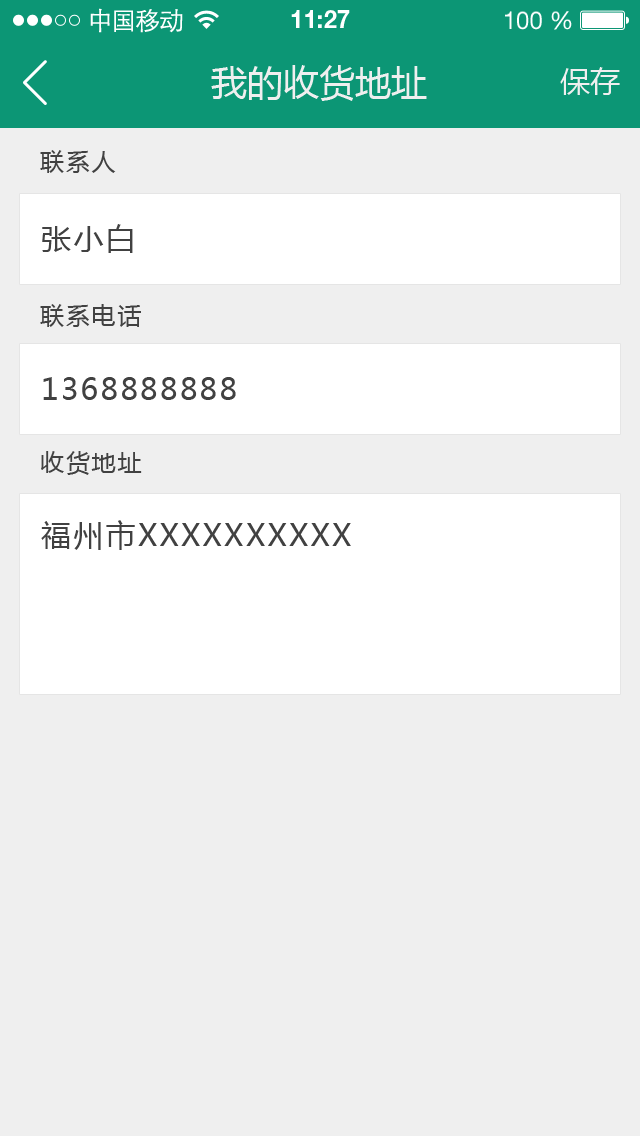
<style>
.page{position:relative;width:640px;height:1136px;background:#efefef}
.page>*{position:absolute;margin:0}
.t1{font:25px "STXihei";letter-spacing:-0.045em;color:#fefefe}
.t2{font:24.6px "HelveticaNeueLTPro-Bd";color:#ffffff}
.t3{font:24.6px "HelveticaNeueLTStd-Roman";color:#ffffff}
.t4{font:36px "MicrosoftYaHei";color:#efefef}
.t5{font:30px "MicrosoftYaHei";color:#efefef}
.t6{font:24px "MicrosoftYaHei";letter-spacing:0.075em;color:#414141}
.t7{font:30px "MicrosoftYaHei";letter-spacing:0.075em;color:#414141}
</style>
<div class="page">
<p class="t1" style="left:90px;top:8px;width:93px;height:25px">中国移动</p>
<p class="t2" style="left:291px;top:10px;width:59px;height:18px">11:27</p>
<p class="t3" style="left:505px;top:11px;width:67px;height:19px">100 %</p>
<p class="t4" style="left:211px;top:65px;width:216px;height:36px">我的收货地址</p>
<p class="t5" style="left:560px;top:67px;width:60px;height:28px">保存</p>
<p class="t6" style="left:40px;top:150px;width:76px;height:23px">联系人</p>
<p class="t7" style="left:42px;top:224px;width:91px;height:29px">张小白</p>
<p class="t6" style="left:40px;top:304px;width:101px;height:23px">联系电话</p>
<p class="t7" style="left:43px;top:377px;width:193px;height:23px">1368888888</p>
<p class="t6" style="left:41px;top:451px;width:101px;height:24px">收货地址</p>
<p class="t7" style="left:41px;top:520px;width:310px;height:30px">福州市XXXXXXXXXX</p>
</div>
